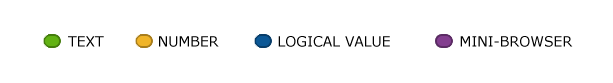
<style>
.page{position:relative;width:613px;height:83px;background:#ffffff}
.page>*{position:absolute;margin:0}
.t1{font:14px "Verdana";color:#000000}
</style>
<div class="page">
<p class="t1" style="left:68px;top:36px;width:505px;height:11px">TEXT           NUMBER            LOGICAL VALUE              MINI-BROWSER</p>
</div>
